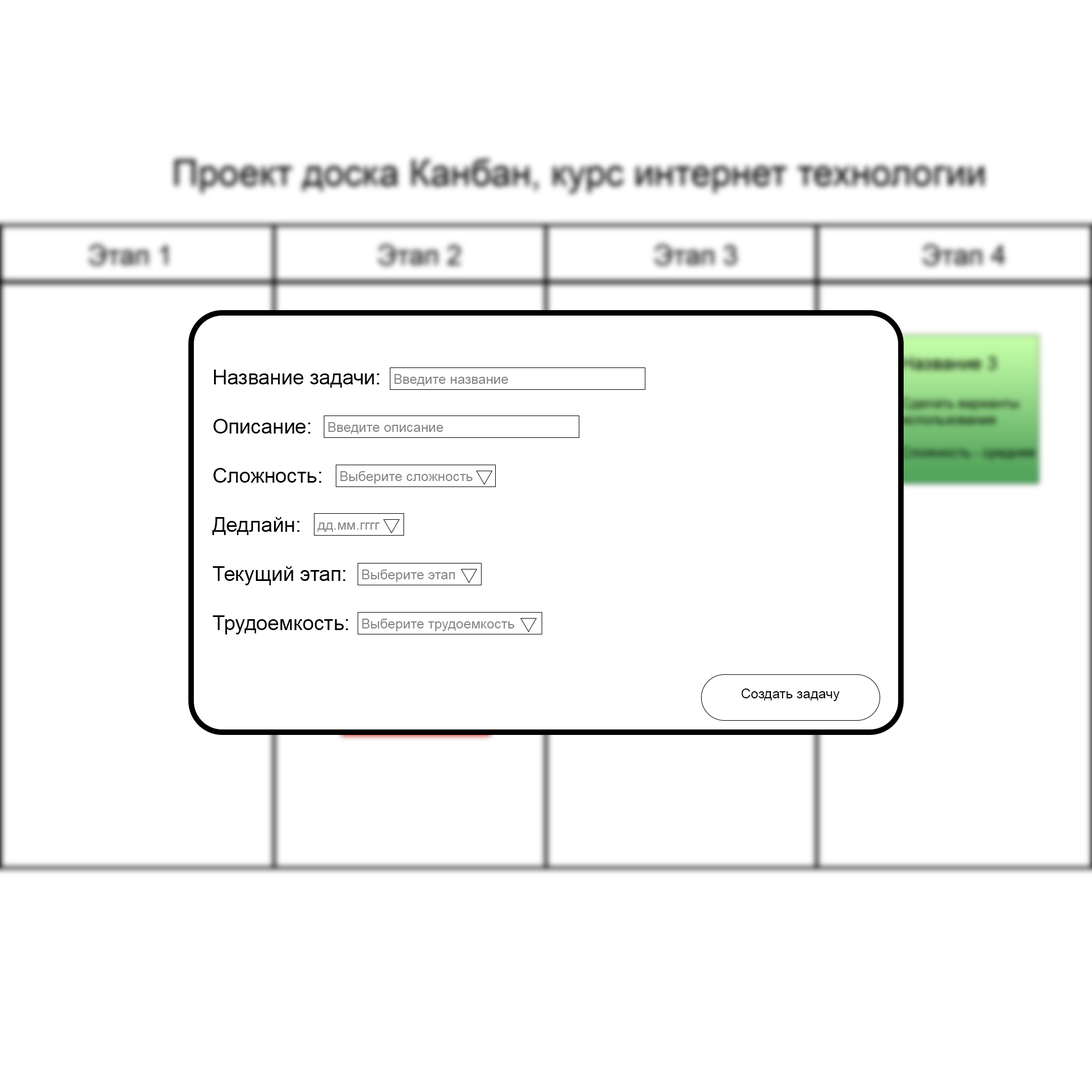
<style>
.page{position:relative;width:1092px;height:1092px;background:#ffffff}
.page>*{position:absolute;margin:0}
.t1{font:20.5px "ArialMT";color:#000000}
.t2{font:36.4px "ArialMT";color:#000000}
.t3{font:13.6px "ArialMT";color:#848484}
.t4{font:13.6px "ArialMT";color:#000000}
</style>
<div class="page">
<p class="t1" style="left:212px;top:370px;width:167px;height:264px"><span class="t2"><br></span>Название задачи: <br><br>Описание:<br><br>Сложность: <br><br>Дедлайн: <br><br>Текущий этап: <br><br>Трудоемкость:</p>
<p class="t3" style="left:394px;top:374px;width:114px;height:12px">Введите название</p>
<p class="t3" style="left:328px;top:422px;width:115px;height:12px">Введите описание</p>
<p class="t3" style="left:340px;top:471px;width:133px;height:13px">Выберите сложность</p>
<p class="t3" style="left:317px;top:523px;width:63px;height:9px">дд.мм.гггг</p>
<p class="t3" style="left:362px;top:569px;width:93px;height:13px">Выберите этап</p>
<p class="t3" style="left:362px;top:619px;width:152px;height:12px">Выберите трудоемкость</p>
<p class="t4" style="left:741px;top:688px;width:99px;height:13px">Создать задачу</p>
</div>
